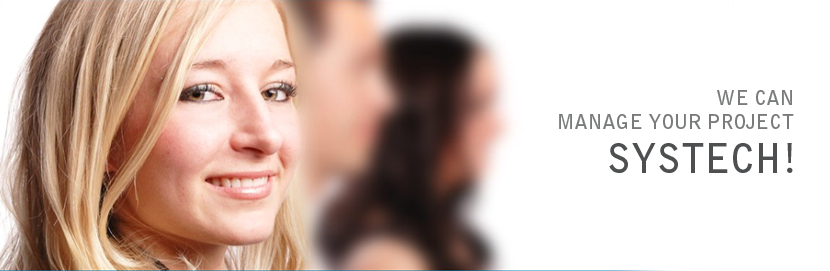
<style>
.page{position:relative;width:830px;height:271px;background:#ffffff}
.page>*{position:absolute;margin:0}
.t1{font:20px "BellGothicStd-Bold";color:#797b7b}
.t2{font:39px "BellGothicStd-Bold";color:#4d4f50}
</style>
<div class="page">
<p class="t1" style="left:559px;top:90px;width:235px;height:39px">WE CAN <br>MANAGE YOUR PROJECT</p>
<p class="t2" style="left:609px;top:143px;width:184px;height:30px">SYSTECH!</p>
</div>
